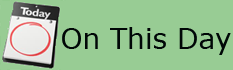
<style>
.page{position:relative;width:233px;height:70px;background:#98cc94}
.page>*{position:absolute;margin:0}
.t1{font:28px "Verdana";color:#000707}
</style>
<div class="page">
<p class="t1" style="left:62px;top:27px;width:169px;height:28px">On This Day</p>
</div>
